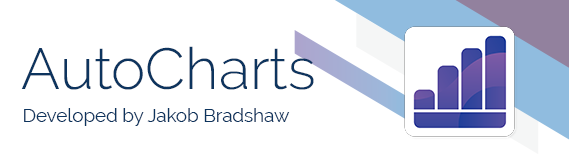
<style>
.page{position:relative;width:569px;height:167px;background:#ffffff}
.page>*{position:absolute;margin:0}
.t1{font:57.7px "Raleway-Light";color:#0d345e}
.t2{font:18.7px "Raleway-Regular";color:#0d345e}
</style>
<div class="page">
<p class="t1" style="left:21px;top:46px;width:293px;height:44px">AutoCharts</p>
<p class="t2" style="left:24px;top:108px;width:266px;height:18px">Developed by Jakob Bradshaw</p>
</div>
